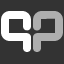
<style>
.page{position:relative;width:64px;height:64px;background:#333333}
.page>*{position:absolute;margin:0}
.t1{font:58.3px "DesignerBlock";color:#ffffff}
.t2{font:58.3px "DesignerBlock";color:#aeaeae}
</style>
<div class="page">
<p class="t1" style="left:1px;top:11px;width:30px;height:41px">q</p>
<p class="t2" style="left:33px;top:11px;width:30px;height:41px">p</p>
</div>
